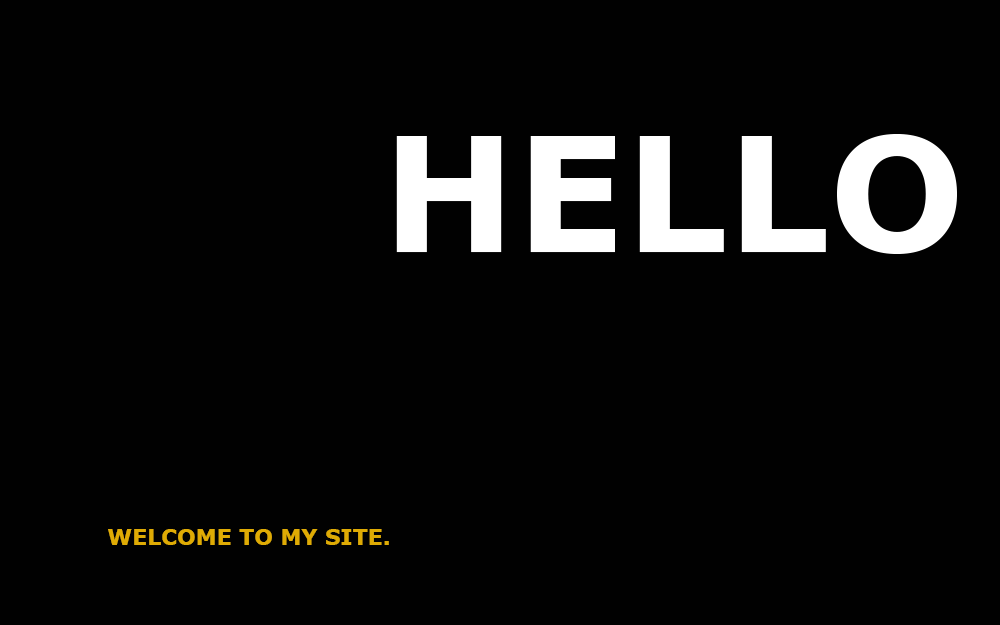
<style>
.page{position:relative;width:1000px;height:625px;background:#010101}
.page>*{position:absolute;margin:0}
.t1{font:160px "Verdana-Bold";color:#ffffff}
.t2{font:22px "Verdana-Bold";color:#dfab04}
.t3{font:22px "Verdana-Bold";color:#f5bb00}
</style>
<div class="page">
<p class="t1" style="left:396px;top:134px;width:561px;height:120px">HELLO</p>
<p class="t2" style="left:108px;top:529px;width:281px;height:16px">WELCOME TO MY SITE.</p>
<p class="t3" style="left:108px;top:529px;width:281px;height:16px;opacity:0.84">WELCOME TO MY SITE.</p>
</div>
